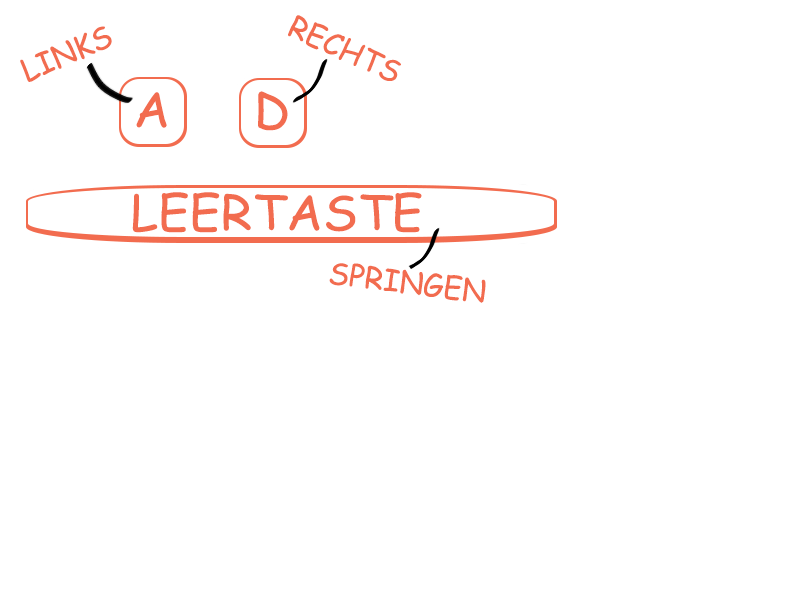
<style>
.page{position:relative;width:800px;height:600px;background:#ffffff}
.page>*{position:absolute;margin:0}
.t1{font:30px "ComicSansMS";color:#f26c4f}
.t2{font:48px "ComicSansMS";color:#f26c4f;scale:1.04 1}
</style>
<div class="page">
<p class="t1" style="left:288px;top:15px;width:113px;height:66px;rotate:24deg">RECHTS</p>
<p class="t1" style="left:20px;top:26px;width:92px;height:56px;rotate:-23deg">LINKS</p>
<p class="t2" style="left:136px;top:92px;width:31px;height:36px">A</p>
<p class="t2" style="left:258px;top:91px;width:30px;height:40px">D</p>
<p class="t2" style="left:132px;top:192px;width:290px;height:41px">LEERTASTE</p>
<p class="t1" style="left:329px;top:263px;width:157px;height:40px;rotate:7deg">SPRINGEN</p>
</div>
